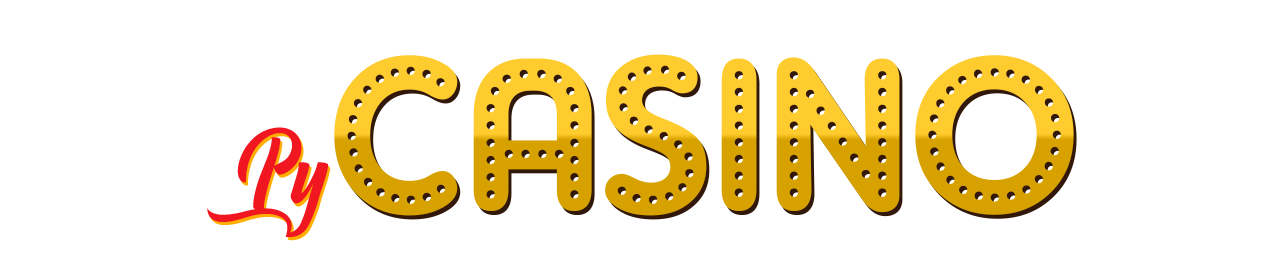
<style>
.page{position:relative;width:1280px;height:261px;background:#ffffff}
.page>*{position:absolute;margin:0}
.t1{font:219.7px "AdamGorry-Lights";letter-spacing:-0.02em}
.t2{font:89.1px "Handycheera";letter-spacing:-0.02em;color:#f01721}
</style>
<div class="page">
<p class="t1" style="left:334px;top:54px;width:740px;height:162px">CASINO</p>
<p class="t2" style="left:207px;top:127px;width:122px;height:111px">Py</p>
</div>
